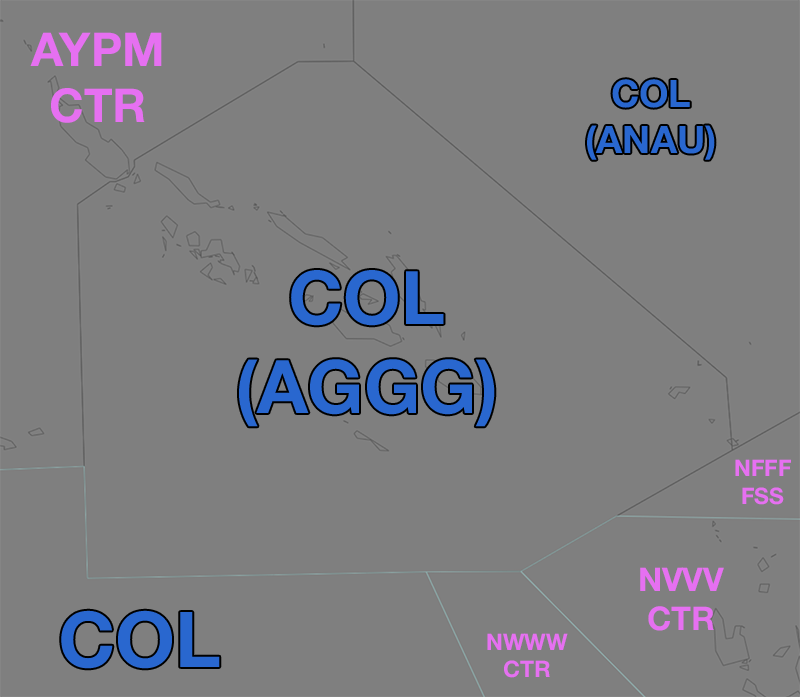
<style>
.page{position:relative;width:800px;height:697px;background:#7f7f7f}
.page>*{position:absolute;margin:0}
.t1{font:46.7px "HelveticaNeue-Bold";color:#e670f1}
.t2{font:38px "HelveticaNeue-Bold";color:#2967cf}
.t3{font:74.1px "HelveticaNeue-Bold";color:#2967cf}
.t4{font:22.8px "HelveticaNeue-Bold";color:#e670f1}
.t5{font:32.6px "HelveticaNeue-Bold";color:#e670f1}
.t6{font:77.1px "HelveticaNeue-Bold";color:#2967cf}
</style>
<div class="page">
<p class="t1" style="left:30px;top:32px;width:132px;height:91px;text-align:center">AYPM<br>CTR</p>
<p class="t2" style="left:587px;top:79px;width:128px;height:81px;text-align:center">COL<br>(ANAU)</p>
<p class="t3" style="left:239px;top:270px;width:256px;height:157px;text-align:center">COL<br>(AGGG)</p>
<p class="t4" style="left:735px;top:459px;width:56px;height:46px;text-align:center">NFFF<br>FSS</p>
<p class="t5" style="left:640px;top:567px;width:84px;height:64px;text-align:center">NVVV<br>CTR</p>
<p class="t6" style="left:61px;top:610px;width:159px;height:59px">COL</p>
<p class="t4" style="left:487px;top:633px;width:81px;height:45px;text-align:center">NWWW<br>CTR</p>
</div>
